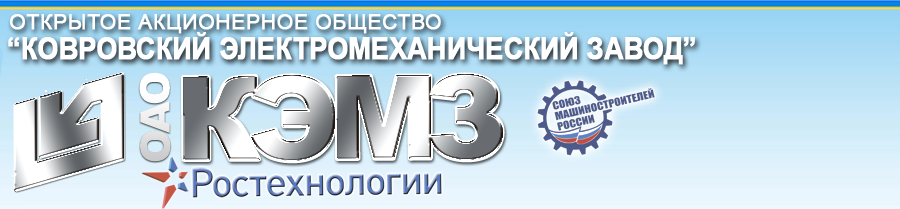
<style>
.page{position:relative;width:900px;height:209px}
.page>*{position:absolute;margin:0}
.t1{font:29.7px/29.7px "Arial-BoldMT";letter-spacing:-0.01em;color:#ffffff;font-weight:bold;scale:0.9 1}
.t2{font:21.4px/29.7px "ArialMT";color:#ffffff;text-transform:uppercase;font-weight:bold}
.t3{font:41.1px "Arial-Black";letter-spacing:-0.1em;color:#f0f0f1;text-transform:uppercase}
.t4{font:115.7px "Arial-Black";letter-spacing:-0.1em;text-transform:uppercase}
</style>
<div class="page">
<p class="t1" style="left:8px;top:14px;width:687px;height:51px"><span class="t2">   Открытое акционерное общество<br></span>“КОВРОВСКИЙ ЭЛЕКТРОМЕХАНИЧЕСКИЙ ЗАВОД”</p>
<p class="t3" style="left:139px;top:72px;width:32px;height:90px;rotate:-90deg">ОАО</p>
<p class="t4" style="left:183px;top:74px;width:320px;height:88px">КЭМЗ</p>
</div>
